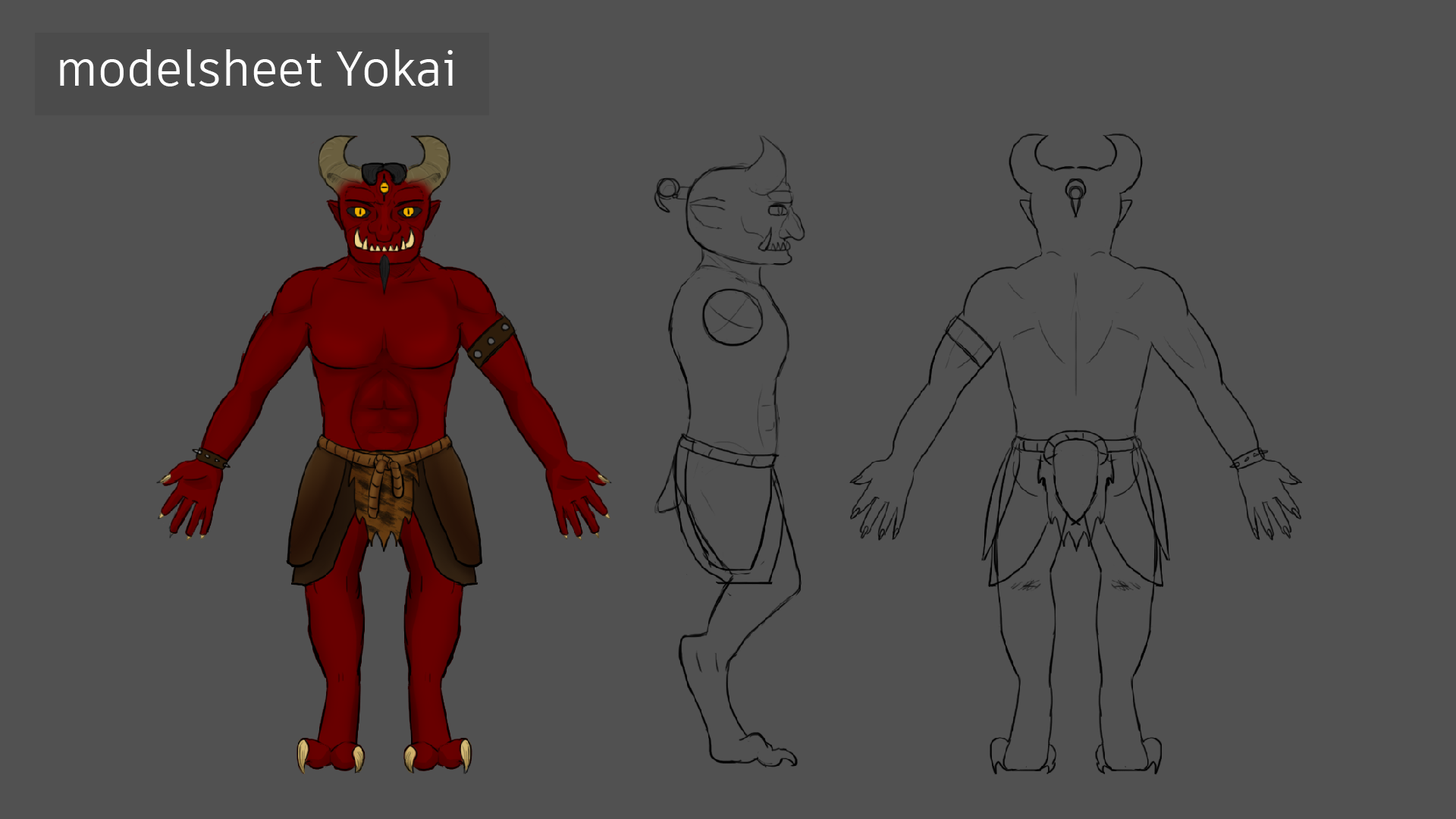
<style>
.page{position:relative;width:1456px;height:819px;background:#515151}
.page>*{position:absolute;margin:0}
.t1{font:48.4px "ArtifaktElement-Regular";color:#ffffff}
</style>
<div class="page">
<p class="t1" style="left:60px;top:49px;width:393px;height:37px">modelsheet Yokai</p>
</div>
